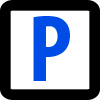
<style>
.page{position:relative;width:100px;height:100px;background:#ffffff}
.page>*{position:absolute;margin:0}
.t1{font:96px "MyriadPro-BoldCond";color:#004ce7}
</style>
<div class="page">
<p class="t1" style="left:33px;top:16px;width:37px;height:65px">P</p>
</div>
